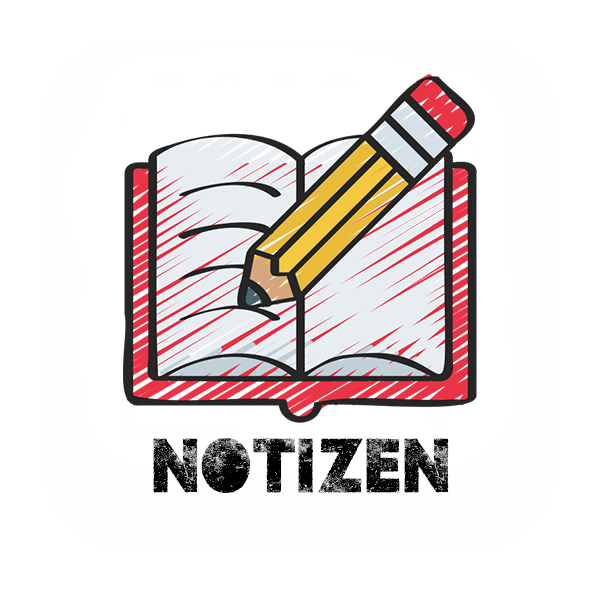
<style>
.page{position:relative;width:600px;height:600px;background:#ffffff}
.page>*{position:absolute;margin:0}
.t1{font:80px "UNDERWAYPERSONALUSE-Bold";color:#000000}
</style>
<div class="page">
<p class="t1" style="left:153px;top:438px;width:296px;height:55px">NOTIZEN</p>
</div>
